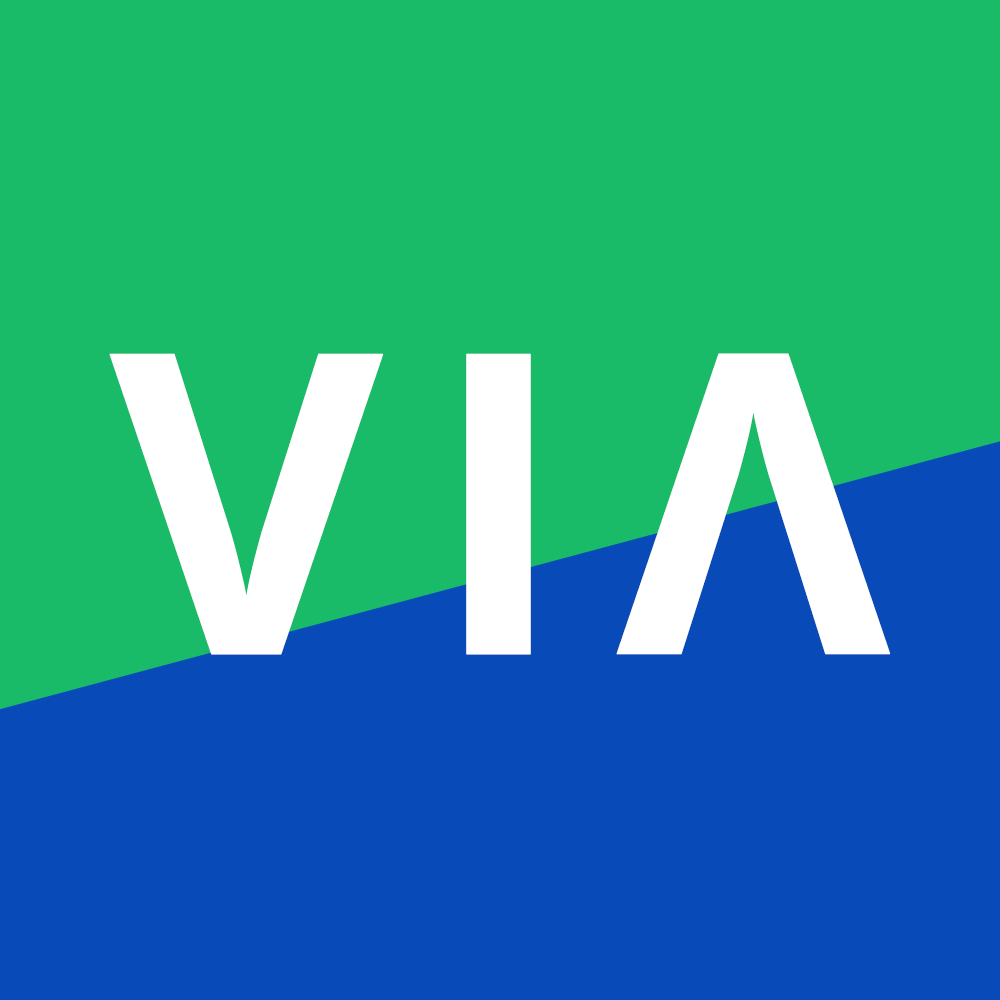
<style>
.page{position:relative;width:1000px;height:1000px;background:#1abb68}
.page>*{position:absolute;margin:0}
.t1{font:419.7px "OpenSans-Bold";color:#ffffff;font-weight:bold}
</style>
<div class="page">
<p class="t1" style="left:109px;top:353px;width:275px;height:302px">V</p>
<p class="t1" style="left:466px;top:353px;width:65px;height:302px">I</p>
<p class="t1" style="left:616px;top:353px;width:275px;height:302px;rotate:180deg">V</p>
</div>
